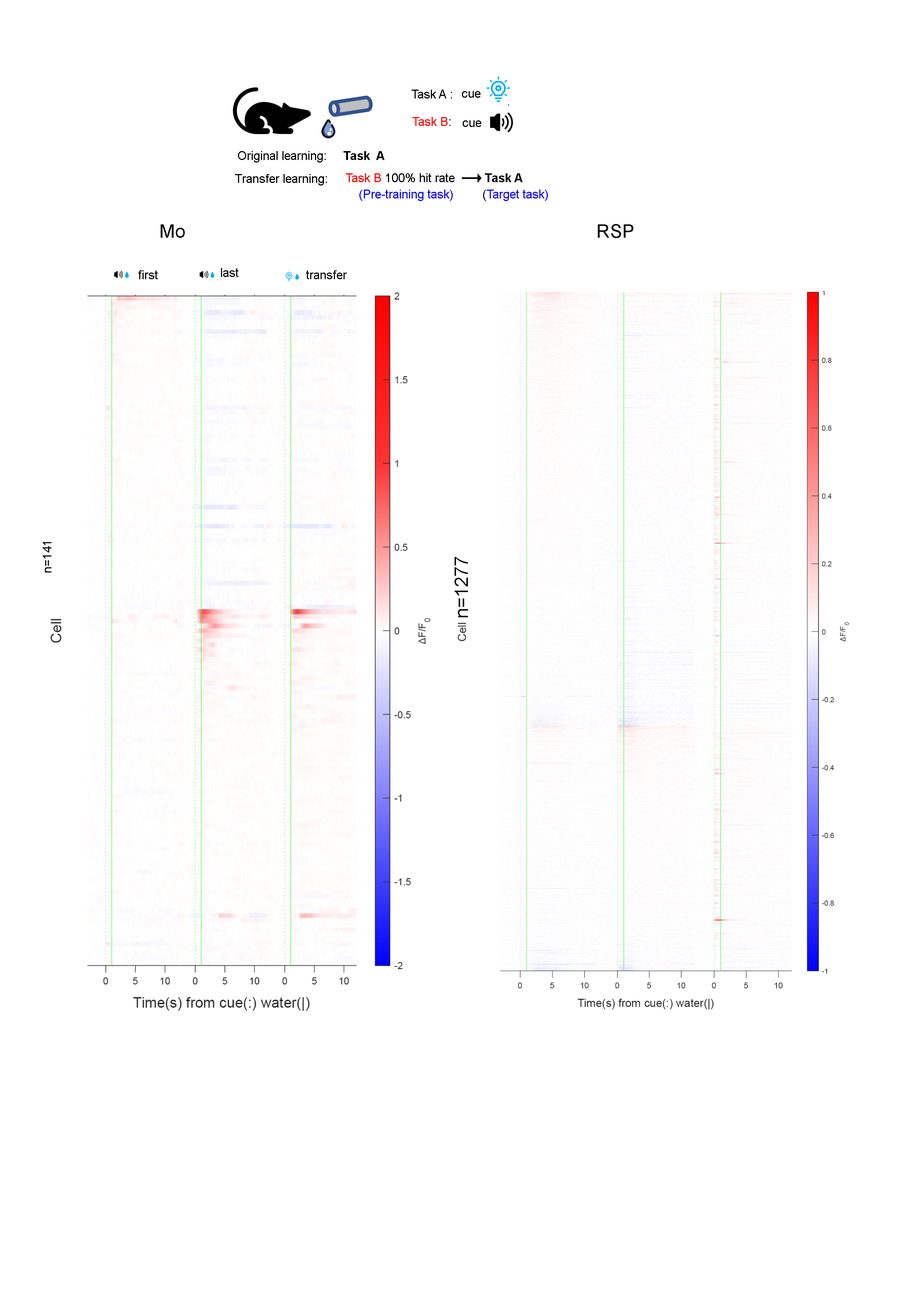
<style>
.page{position:relative;width:918px;height:1299px;background:#ffffff}
.page>*{position:absolute;margin:0}
.t1{font:12.3px "ArialMT";color:#000000}
.t2{font:12.3px "ArialMT";color:#fd0606}
.t3{font:12.3px "Arial-BoldMT";color:#000000}
.t4{font:12.3px "ArialMT";color:#fd0000}
.t5{font:12.3px "Arial-BoldMT";color:#070707}
.t6{font:12.3px "ArialMT";color:#0900ff}
.t7{font:12.3px "ArialMT";color:#0d04fe}
.t8{font:12.3px "ArialMT";color:#070707}
.t9{font:18.5px "ArialMT";color:#030303}
.t10{font:12.3px "ArialMT";color:#030303}
</style>
<div class="page">
<p class="t1" style="left:412px;top:90px;width:40px;height:8px">Task A :</p>
<p class="t1" style="left:462px;top:91px;width:19px;height:7px">cue</p>
<p class="t2" style="left:412px;top:117px;width:39px;height:9px">Task B<span class="t1">:</span></p>
<p class="t1" style="left:463px;top:120px;width:18px;height:7px">cue</p>
<p class="t1" style="left:238px;top:151px;width:88px;height:12px">Original learning:</p>
<p class="t3" style="left:344px;top:151px;width:41px;height:9px">Task  A</p>
<p class="t1" style="left:346px;top:173px;width:109px;height:9px"><span class="t4">Task B</span> 100% hit rate</p>
<p class="t5" style="left:485px;top:173px;width:38px;height:9px">Task A</p>
<p class="t1" style="left:235px;top:174px;width:92px;height:11px">Transfer learning:</p>
<p class="t6" style="left:359px;top:190px;width:94px;height:11px">(Pre-training task)</p>
<p class="t7" style="left:483px;top:190px;width:65px;height:11px"><span class="t8">(</span>Target task)</p>
<p class="t9" style="left:161px;top:224px;width:24px;height:14px">Mo</p>
<p class="t9" style="left:598px;top:224px;width:35px;height:14px">RSP</p>
<p class="t10" style="left:221px;top:268px;width:17px;height:9px">last</p>
<p class="t10" style="left:138px;top:270px;width:20px;height:9px">first</p>
<p class="t10" style="left:306px;top:270px;width:41px;height:9px">transfer</p>
<p class="t10" style="left:43px;top:542px;width:8px;height:30px;rotate:-90deg">n=141</p>
<p class="t9" style="left:455px;top:557px;width:13px;height:60px;rotate:-90deg">n=1277</p>
</div>
